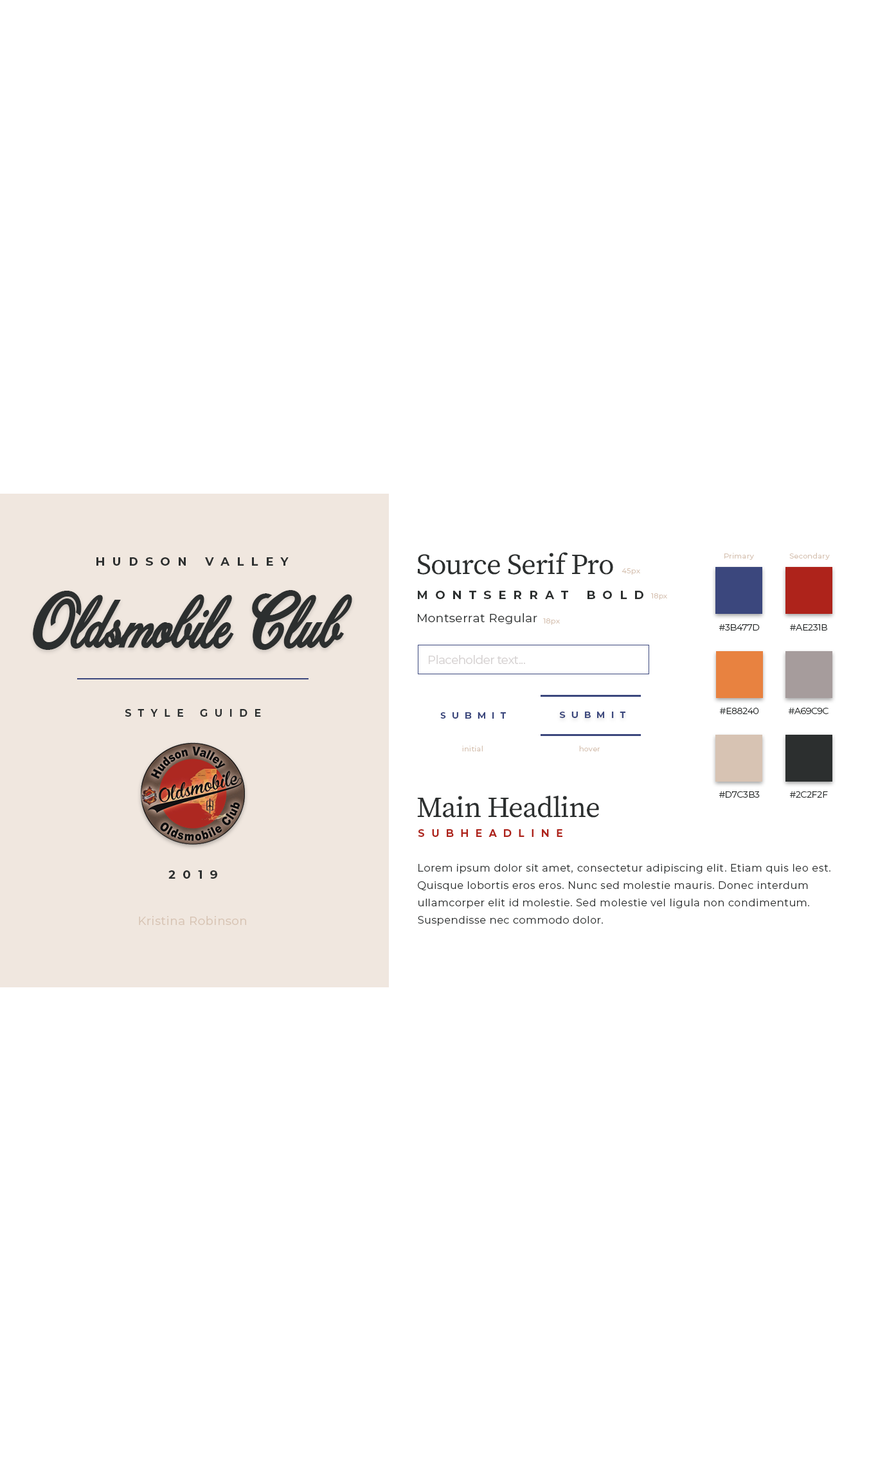
<style>
.page{position:relative;width:878px;height:1481px;background:#ffffff}
.page>*{position:absolute;margin:0}
.t1{font:11.6px "Montserrat-Bold";letter-spacing:0.64em;color:#2c2f2f}
.t2{font:28.9px "SourceSerifRoman-Regular";letter-spacing:-0.02em;color:#2c2f2f}
.t3{font:7.1px "Montserrat-Regular";letter-spacing:0.04em;color:#d7c3b3}
.t4{font:61.1px "DattermatterBoldPersoinalUse-Re";letter-spacing:-0.01em;color:#2c2f2f}
.t5{font:11.6px "Montserrat-Regular";letter-spacing:0.04em;color:#2c2f2f}
.t6{font:9px "Montserrat-Regular";letter-spacing:-0.02em;color:#2c2f2f}
.t7{font:11.6px "Montserrat-Regular";letter-spacing:-0.02em;color:#d5d1d1}
.t8{font:10.3px "Montserrat-Bold";letter-spacing:0.64em;color:#2c2f2f}
.t9{font:9px "Montserrat-Bold";letter-spacing:0.64em;color:#3b477d}
.t10{font:10.3px "Montserrat-Bold";letter-spacing:0.64em;color:#ae231b}
.t11{font:10.3px/17.4px "Montserrat-Regular";letter-spacing:0.04em;color:#2c2f2f}
.t12{font:11.6px "Montserrat-Regular";letter-spacing:0.04em;color:#d7c3b3}
</style>
<div class="page">
<p class="t1" style="left:96px;top:557px;width:193px;height:9px">HUDSON VALLEY</p>
<p class="t2" style="left:417px;top:552px;width:196px;height:23px">Source Serif Pro</p>
<p class="t3" style="left:724px;top:553px;width:30px;height:7px">Primary</p>
<p class="t3" style="left:789px;top:553px;width:41px;height:7px">Secondary</p>
<p class="t3" style="left:622px;top:568px;width:18px;height:7px">45px</p>
<p class="t4" style="left:33px;top:590px;width:319px;height:60px">Oldsmobile Club</p>
<p class="t1" style="left:418px;top:591px;width:226px;height:8px">MONTSERRAT BOLD</p>
<p class="t3" style="left:651px;top:593px;width:16px;height:7px">18px</p>
<p class="t5" style="left:418px;top:613px;width:119px;height:11px">Montserrat Regular</p>
<p class="t3" style="left:543px;top:618px;width:17px;height:7px">18px</p>
<p class="t6" style="left:719px;top:624px;width:41px;height:7px">#3B477D</p>
<p class="t6" style="left:790px;top:624px;width:37px;height:7px">#AE231B</p>
<p class="t7" style="left:429px;top:655px;width:96px;height:9px">Placeholder text...</p>
<p class="t8" style="left:125px;top:709px;width:136px;height:8px">STYLE GUIDE</p>
<p class="t9" style="left:440px;top:712px;width:66px;height:7px">SUBMIT</p>
<p class="t9" style="left:559px;top:712px;width:67px;height:6px">SUBMIT</p>
<p class="t6" style="left:719px;top:708px;width:40px;height:6px">#E88240</p>
<p class="t6" style="left:788px;top:708px;width:41px;height:6px">#A69C9C</p>
<p class="t3" style="left:462px;top:746px;width:21px;height:6px">initial</p>
<p class="t3" style="left:579px;top:746px;width:21px;height:6px">hover</p>
<p class="t2" style="left:417px;top:795px;width:182px;height:23px">Main Headline</p>
<p class="t6" style="left:719px;top:791px;width:41px;height:7px">#D7C3B3</p>
<p class="t6" style="left:789px;top:791px;width:39px;height:7px">#2C2F2F</p>
<p class="t10" style="left:418px;top:829px;width:144px;height:8px">SUBHEADLINE</p>
<p class="t11" style="left:418px;top:864px;width:413px;height:62px">Lorem ipsum dolor sit amet, consectetur adipiscing elit. Etiam quis leo est. <br>Quisque lobortis eros eros. Nunc sed molestie mauris. Donec interdum <br>ullamcorper elit id molestie. Sed molestie vel ligula non condimentum. <br>Suspendisse nec commodo dolor.</p>
<p class="t1" style="left:168px;top:870px;width:49px;height:9px">2019</p>
<p class="t12" style="left:139px;top:916px;width:107px;height:9px">Kristina Robinson</p>
</div>
